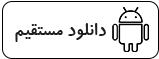
<style>
.page{position:relative;width:159px;height:59px;background:#ffffff}
.page>*{position:absolute;margin:0}
.t1{font:20px "BKoodakBold";color:#201d1d}
</style>
<div class="page">
<p class="t1" style="left:15px;top:23px;width:91px;height:19px">دانلود مستقیم</p>
</div>
